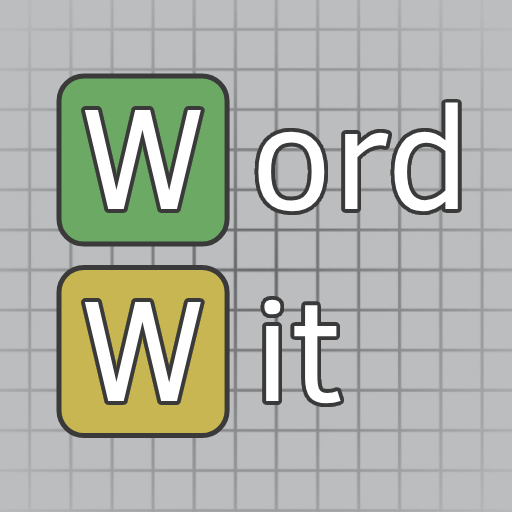
<style>
.page{position:relative;width:512px;height:512px;background:#bbbdbf}
.page>*{position:absolute;margin:0}
.t1{font:146.4px "ClearSans";color:#ffffff}
</style>
<div class="page">
<p class="t1" style="left:258px;top:102px;width:200px;height:110px">ord</p>
<p class="t1" style="left:84px;top:110px;width:117px;height:99px">W</p>
<p class="t1" style="left:84px;top:302px;width:117px;height:99px">W</p>
<p class="t1" style="left:264px;top:299px;width:77px;height:105px">it</p>
</div>
